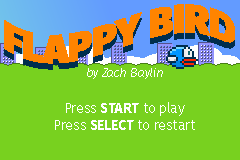
<style>
.page{position:relative;width:240px;height:160px;background:#78d11f}
.page>*{position:absolute;margin:0}
.t1{font:40px "FiraSans-Ultra";color:#ff8400}
.t2{font:40px "FiraSans-Ultra"}
.t3{font:12px "FiraSans-HairItalic";color:#ffffff}
.t4{font:14px "FiraSans-Regular";color:#ffffff}
.t5{font:14px "FiraSans-Bold";color:#ffffff}
</style>
<div class="page">
<p class="t1" style="left:4px;top:4px;width:231px;height:60px">FLAPPY BIRD</p>
<p class="t2" style="left:4px;top:10px;width:231px;height:60px">FLAPPY BIRD</p>
<p class="t3" style="left:87px;top:68px;width:76px;height:11px">by Zach Baylin</p>
<p class="t4" style="left:55px;top:102px;width:140px;height:28px;text-align:center">Press <span class="t5">START</span> to play<br>Press <span class="t5">SELECT </span>to restart</p>
</div>
